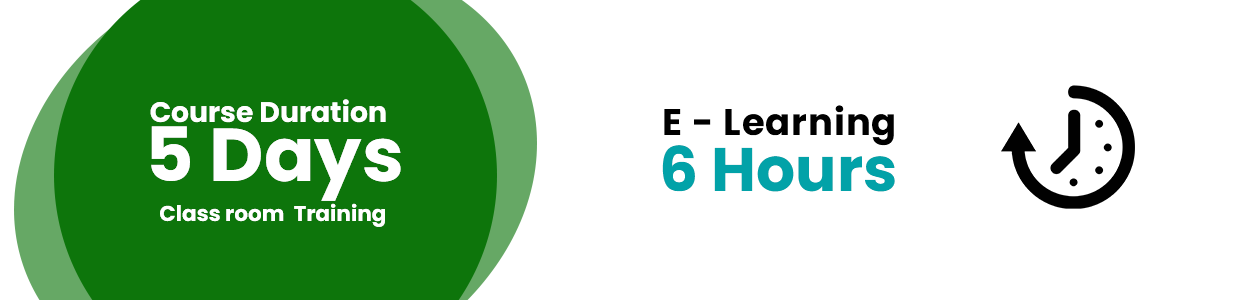
<style>
.page{position:relative;width:1250px;height:300px;background:#ffffff}
.page>*{position:absolute;margin:0}
.t1{font:28.2px "Poppins-Bold";color:#ffffff}
.t2{font:36.9px "Poppins-Bold";letter-spacing:0.025em;color:#000000}
.t3{font:74.8px "Poppins-Bold";color:#ffffff}
.t4{font:61.4px "Poppins-Bold";color:#02a2a8}
.t5{font:21.5px "Poppins-Bold";color:#ffffff}
</style>
<div class="page">
<p class="t1" style="left:150px;top:99px;width:236px;height:24px">Course Duration</p>
<p class="t2" style="left:664px;top:105px;width:230px;height:41px">E - Learning</p>
<p class="t3" style="left:151px;top:126px;width:250px;height:75px">5 Days</p>
<p class="t4" style="left:662px;top:145px;width:233px;height:47px">6 Hours</p>
<p class="t5" style="left:160px;top:203px;width:225px;height:24px">Class room  Training</p>
</div>
